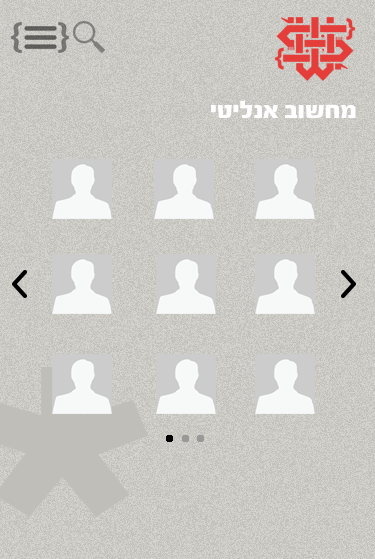
<style>
.page{position:relative;width:375px;height:559px}
.page>*{position:absolute;margin:0}
.t1{font:25px "FbScorpion-Black";color:#ffffff}
</style>
<div class="page">
<p class="t1" style="left:211px;top:100px;width:145px;height:18px">יטילנא בושחמ</p>
</div>
